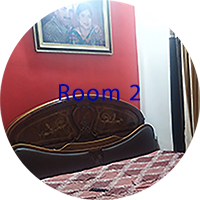
<style>
.page{position:relative;width:200px;height:200px;background:#ffffff}
.page>*{position:absolute;margin:0}
.t1{font:24px "MyriadPro-Regular";letter-spacing:0.06em;color:#0008a4}
</style>
<div class="page">
<p class="t1" style="left:59px;top:84px;width:81px;height:17px">Room 2</p>
</div>
